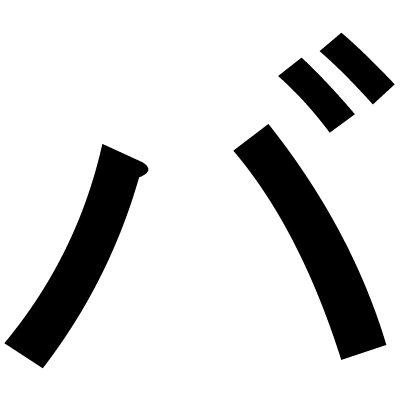
<style>
.page{position:relative;width:400px;height:400px;background:#ffffff}
.page>*{position:absolute;margin:0}
.t1{font:424.8px "MS-PGothic";color:#000000}
</style>
<div class="page">
<p class="t1" style="left:4px;top:32px;width:391px;height:337px">バ</p>
</div>
